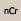
<style>
.page{position:relative;width:21px;height:21px;background:#d9cdc1}
.page>*{position:absolute;margin:0}
.t1{font:9px "Tahoma";color:#000000}
</style>
<div class="page">
<p class="t1" style="left:4px;top:7px;width:14px;height:8px">nCr</p>
</div>
